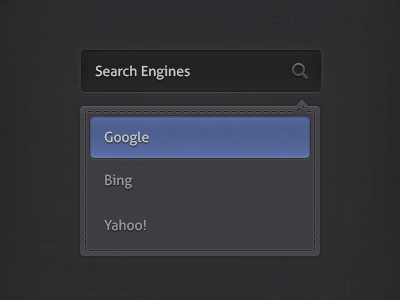
<style>
.page{position:relative;width:400px;height:300px}
.page>*{position:absolute;margin:0}
.t1{font:14px "Aller";color:#cac9ca}
.t2{font:14px "Aller";color:#99999f}
</style>
<div class="page">
<p class="t1" style="left:95px;top:65px;width:95px;height:15px">Search Engines</p>
<p class="t1" style="left:104px;top:131px;width:45px;height:15px">Google</p>
<p class="t2" style="left:105px;top:174px;width:28px;height:15px">Bing</p>
<p class="t2" style="left:104px;top:219px;width:42px;height:12px">Yahoo!</p>
</div>
